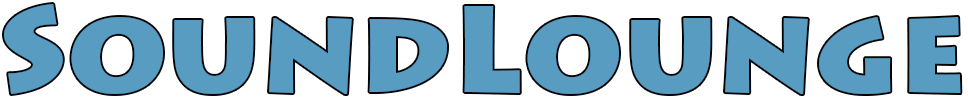
<style>
.page{position:relative;width:968px;height:100px;background:#ffffff}
.page>*{position:absolute;margin:0}
.t1{font:122px "LithosPro-Black";color:#599cc1}
</style>
<div class="page">
<p class="t1" style="left:4px;top:4px;width:957px;height:91px">SoundLounge</p>
</div>
